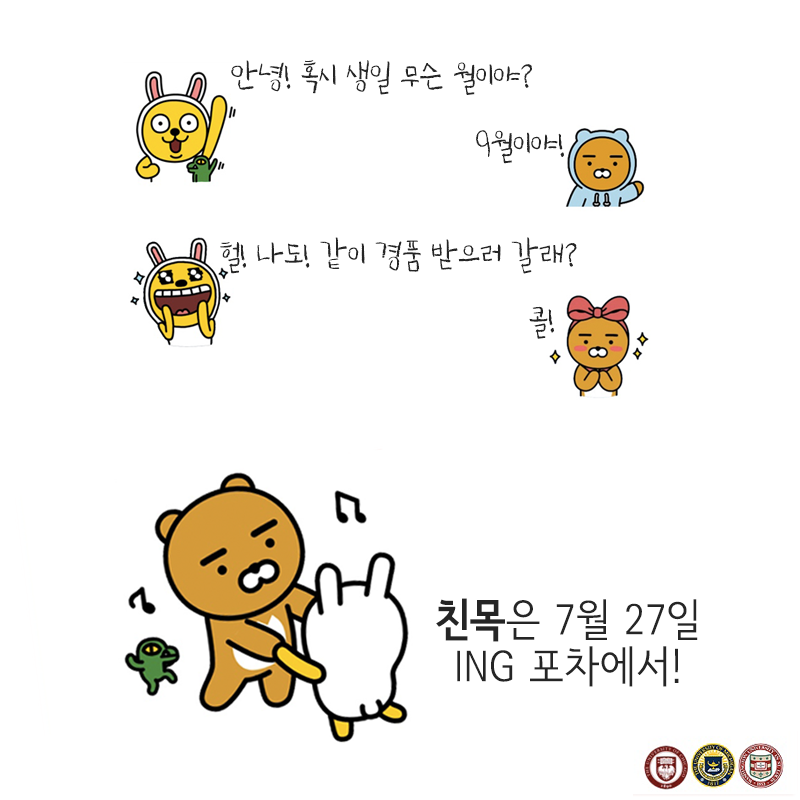
<style>
.page{position:relative;width:800px;height:800px;background:#ffffff}
.page>*{position:absolute;margin:0}
.t1{font:50px "SangSang-Shinb-7";color:#252525}
.t2{font:44px/47px "SeN-CL";color:#252525}
.t3{font:44px/47px "SeN-CEB";color:#252525}
</style>
<div class="page">
<p class="t1" style="left:231px;top:60px;width:301px;height:35px">안녕! 혹시 생일 무슨 월이야?</p>
<p class="t1" style="left:476px;top:130px;width:88px;height:34px">9월이야!</p>
<p class="t1" style="left:220px;top:237px;width:357px;height:37px">헐! 나도! 같이 경품 받으러 갈래?</p>
<p class="t1" style="left:529px;top:306px;width:25px;height:33px">콜!</p>
<p class="t2" style="left:436px;top:598px;width:262px;height:89px;text-align:center"><span class="t3">친목</span>은 7월 27일<br>ING 포차에서!</p>
</div>
